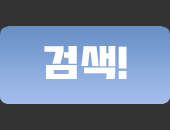
<style>
.page{position:relative;width:170px;height:130px;background:#333333}
.page>*{position:absolute;margin:0}
.t1{font:37.5px "Typo_SsangmunDong_B";color:#ffffff}
</style>
<div class="page">
<p class="t1" style="left:44px;top:46px;width:83px;height:33px">검색!</p>
</div>
